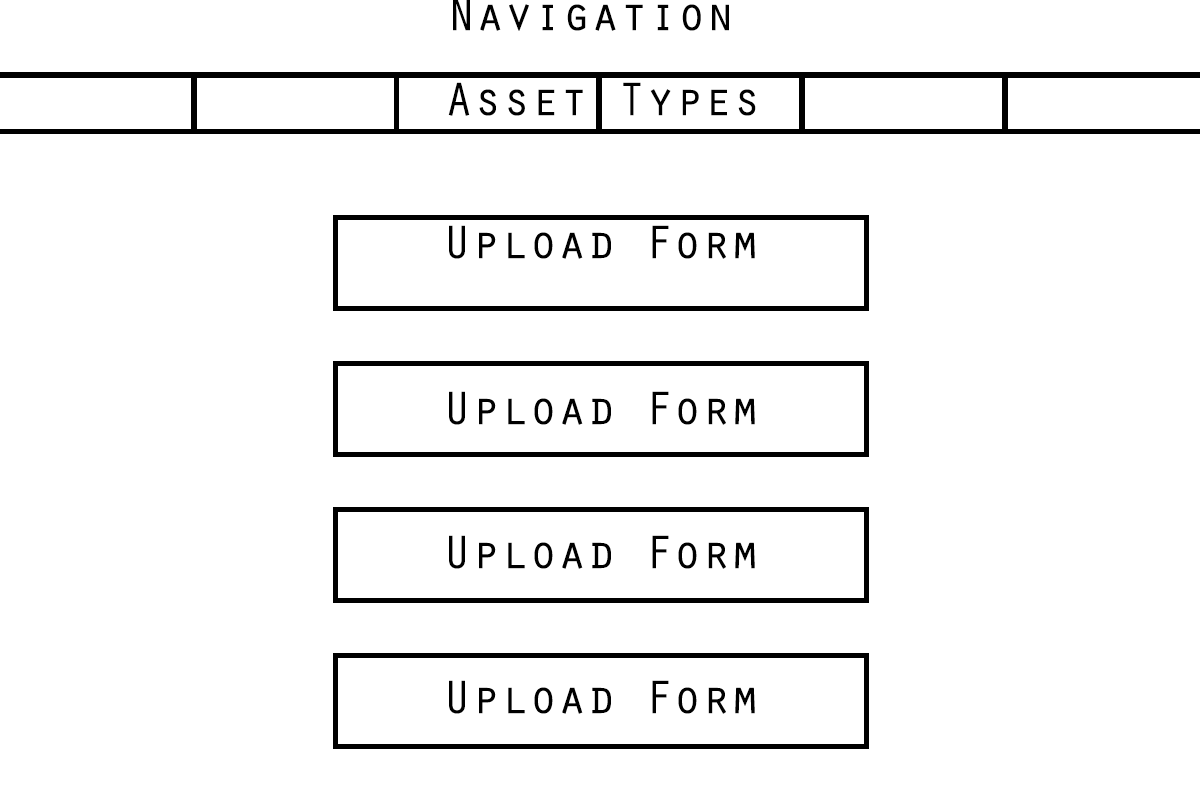
<style>
.page{position:relative;width:1200px;height:800px;background:#ffffff}
.page>*{position:absolute;margin:0}
.t1{font:48px "OratorStd";color:#000000}
</style>
<div class="page">
<p class="t1" style="left:448px;top:82px;width:308px;height:34px">Asset Types</p>
<p class="t1" style="left:449px;top:225px;width:306px;height:34px">Upload Form</p>
<p class="t1" style="left:449px;top:391px;width:306px;height:34px">Upload Form</p>
<p class="t1" style="left:449px;top:535px;width:306px;height:34px">Upload Form</p>
<p class="t1" style="left:449px;top:680px;width:306px;height:34px">Upload Form</p>
</div>
